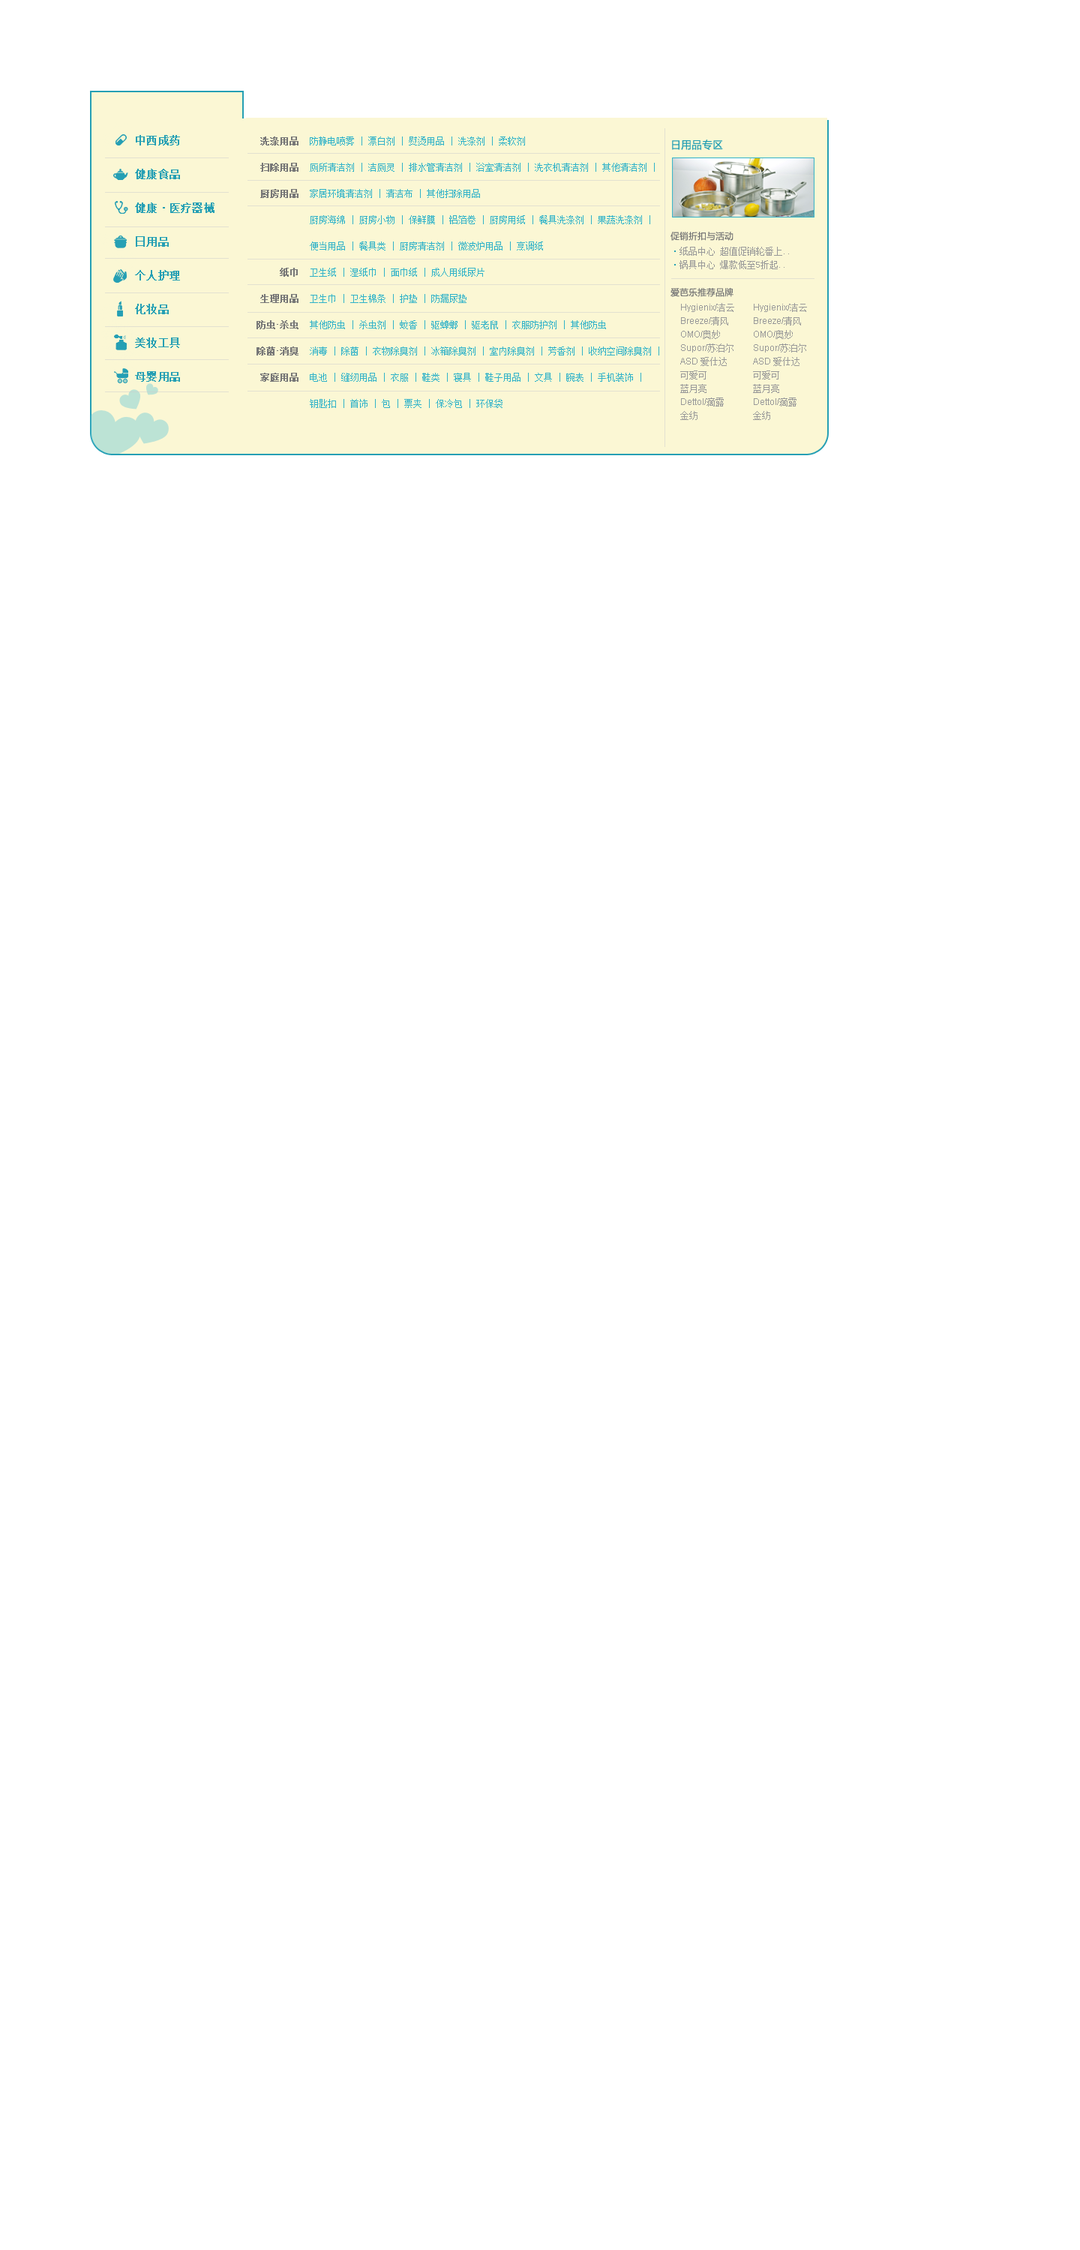
<style>
.page{position:relative;width:1080px;height:2250px;background:#ffffff}
.page>*{position:absolute;margin:0}
.t1{font:10.5px/33.8px "SimSun";letter-spacing:0.02em;color:#259fb4;font-weight:bold}
.t2{font:9px/26.2px "SimSun";color:#777777;font-weight:bold}
.t3{font:9px/26.2px "ArialMT";color:#777777;font-weight:bold}
.t4{font:9px/26.2px "SimSun";color:#30b2c9}
.t5{font:10.7px "FZLTHJW--GB1-0";color:#259fb4}
.t6{font:9.2px "FZLTHJW--GB1-0";color:#777777}
.t7{font:9px/13.5px "SimSun";color:#999999}
.t8{font:9px/13.5px "SimSun";color:#259fb4}
.t9{font:9px/13.5px "ArialMT";color:#999999}
</style>
<div class="page">
<p class="t1" style="left:135px;top:135px;width:79px;height:247px">中西成药<br>健康食品<br>健康·医疗器械<br>日用品<br>个人护理<br>化妆品<br>美妆工具<br>母婴用品</p>
<p class="t2" style="left:256px;top:136px;width:42px;height:246px;text-align:right">洗涤用品<br>扫除用品<br>厨房用品<br><br><br>纸巾<br>生理用品<br>防虫<span class="t3">·</span>杀虫<br>除菌<span class="t3">·</span>消臭<br>家庭用品</p>
<p class="t4" style="left:310px;top:136px;width:349px;height:272px">防静电喷雾 | 漂白剂 | 熨烫用品 | 洗涤剂 | 柔软剂<br>厕所清洁剂 | 洁厕灵 | 排水管清洁剂 | 浴室清洁剂 | 洗衣机清洁剂 | 其他清洁剂 | <br>家居环境清洁剂 | 清洁布 | 其他扫除用品<br>厨房海绵 | 厨房小物 | 保鲜膜 | 铝箔卷 | 厨房用纸 | 餐具洗涤剂 | 果蔬洗涤剂 | <br>便当用品 | 餐具类 | 厨房清洁剂 | 微波炉用品 | 烹调纸<br>卫生纸 | 湿纸巾 | 面巾纸 | 成人用纸尿片<br>卫生巾 | 卫生棉条 | 护垫 | 防漏尿垫<br>其他防虫 | 杀虫剂 | 蚊香 | 驱蟑螂 | 驱老鼠 | 衣服防护剂 | 其他防虫<br>消毒 | 除菌 | 衣物除臭剂 | 冰箱除臭剂 | 室内除臭剂 | 芳香剂 | 收纳空间除臭剂 |<br>电池 | 缝纫用品 | 衣服 | 鞋类 | 寝具 | 鞋子用品 | 文具 | 腕表 | 手机装饰 | <br>钥匙扣 | 首饰 | 包 | 票夹 | 保冷包 | 环保袋</p>
<p class="t5" style="left:672px;top:140px;width:51px;height:10px">日用品专区</p>
<p class="t6" style="left:670px;top:232px;width:64px;height:9px">促销折扣与活动</p>
<p class="t7" style="left:674px;top:247px;width:115px;height:22px"><span class="t8">·</span>纸品中心 超值促销轮番上..<br><span class="t8">·</span>锅具中心 爆款低至5折起..</p>
<p class="t6" style="left:670px;top:287px;width:64px;height:10px">爱芭乐推荐品牌</p>
<p class="t9" style="left:680px;top:303px;width:54px;height:117px">Hygienix/<span class="t7">洁云</span><br>Breeze/<span class="t7">清风</span><br>OMO/<span class="t7">奥妙</span><br>Supor/<span class="t7">苏泊尔</span><br>ASD <span class="t7">爱仕达<br>可爱可<br>蓝月亮</span><br>Dettol/<span class="t7">滴露<br>金纺<br>汰渍</span><br>Ariel/<span class="t7">碧浪<br>妙洁</span><br>SIMELO<br>LOCK&amp;LOCK/<span class="t7">乐扣乐扣</span></p>
<p class="t9" style="left:753px;top:303px;width:54px;height:117px">Hygienix/<span class="t7">洁云</span><br>Breeze/<span class="t7">清风</span><br>OMO/<span class="t7">奥妙</span><br>Supor/<span class="t7">苏泊尔</span><br>ASD <span class="t7">爱仕达<br>可爱可<br>蓝月亮</span><br>Dettol/<span class="t7">滴露<br>金纺<br>汰渍</span><br>Ariel/<span class="t7">碧浪<br>妙洁</span><br>SIMELO<br>LOCK&amp;LOCK/<span class="t7">乐扣乐扣</span></p>
</div>
